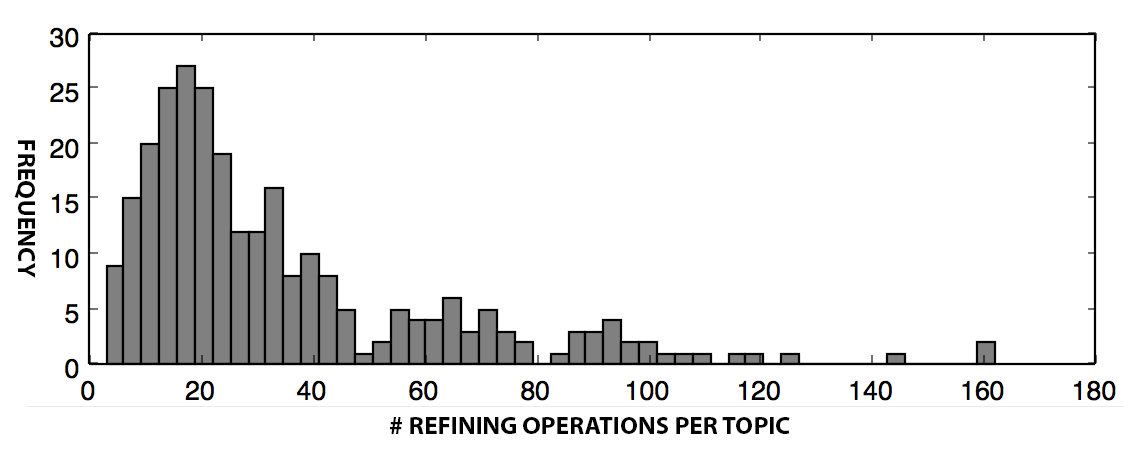
<style>
.page{position:relative;width:1135px;height:454px;background:#ffffff}
.page>*{position:absolute;margin:0}
.t1{font:25.4px "MyriadPro-Bold";color:#000000}
</style>
<div class="page">
<p class="t1" style="left:14px;top:140px;width:21px;height:138px;rotate:90deg">FREQUENCY</p>
<p class="t1" style="left:390px;top:417px;width:400px;height:17px"># REFINING OPERATIONS PER TOPIC</p>
</div>
